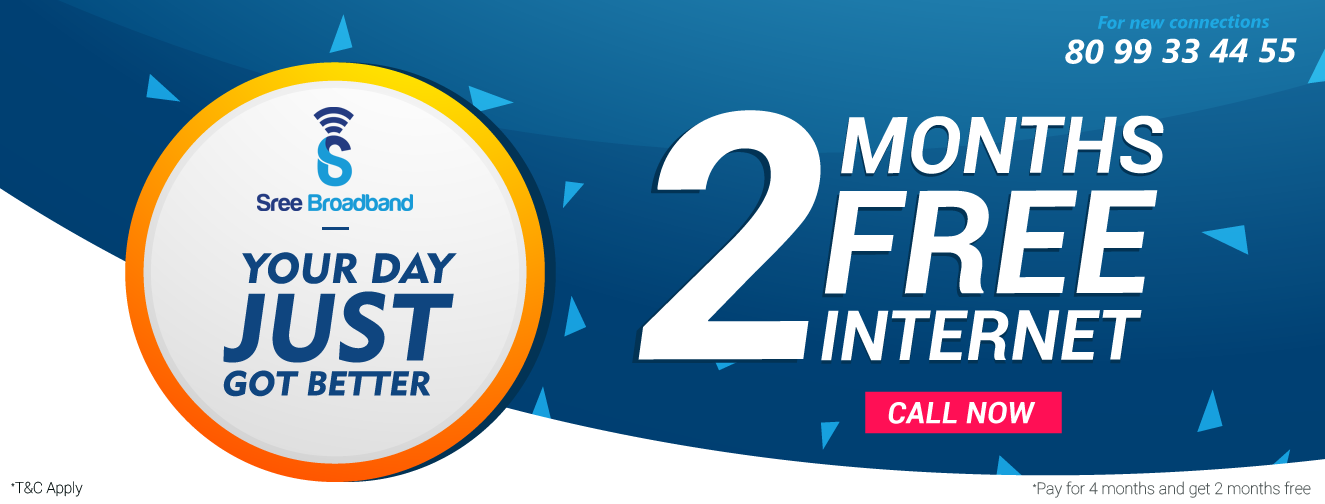
<style>
.page{position:relative;width:1325px;height:504px;background:#ffffff}
.page>*{position:absolute;margin:0}
.t1{font:18.2px "SegoeUI-BoldItalic";color:#1ea8e2}
.t2{font:33.8px "SegoeUI-BoldItalic";color:#ffffff}
.t3{font:344.7px "Roboto-BoldItalic";color:#ffffff}
.t4{font:78.7px "Roboto-BoldItalic";color:#ffffff}
.t5{font:143.8px "Roboto-BoldItalic";color:#ffffff}
.t6{font:69.5px "Roboto-BoldItalic";color:#ffffff}
.t7{font:29.8px "Roboto-BoldItalic";color:#ffffff}
.t8{font:15.1px "Roboto-Thin";color:#030e0e}
.t9{font:16px "Roboto-Thin";color:#4e5656}
</style>
<div class="page">
<p class="t1" style="left:1098px;top:14px;width:171px;height:15px">For new connections</p>
<p class="t2" style="left:1065px;top:38px;width:232px;height:26px">80 99 33 44 55</p>
<p class="t3" style="left:638px;top:110px;width:183px;height:250px">2</p>
<p class="t3" style="left:632px;top:114px;width:183px;height:249px">2</p>
<p class="t4" style="left:840px;top:118px;width:323px;height:59px">MONTHS</p>
<p class="t4" style="left:841px;top:115px;width:323px;height:59px">MONTHS</p>
<p class="t5" style="left:822px;top:194px;width:333px;height:104px">FREE</p>
<p class="t5" style="left:824px;top:190px;width:334px;height:104px">FREE</p>
<p class="t6" style="left:821px;top:313px;width:321px;height:51px">INTERNET</p>
<p class="t6" style="left:821px;top:310px;width:321px;height:51px">INTERNET</p>
<p class="t7" style="left:888px;top:401px;width:148px;height:23px">CALL NOW</p>
<p class="t8" style="left:11px;top:481px;width:72px;height:16px">*T&amp;C Apply</p>
<p class="t9" style="left:1032px;top:481px;width:279px;height:17px">*Pay for 4 months and get 2 months free</p>
</div>
